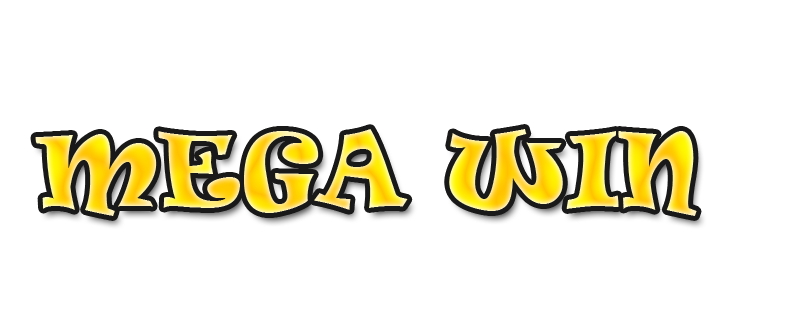
<style>
.page{position:relative;width:800px;height:320px;background:#ffffff}
.page>*{position:absolute;margin:0}
.t1{font:96px "Ravie"}
</style>
<div class="page">
<p class="t1" style="left:35px;top:129px;width:662px;height:87px">MEGA WIN</p>
</div>
